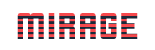
<style>
.page{position:relative;width:155px;height:50px;background:#ffffff}
.page>*{position:absolute;margin:0}
.t1{font:36px "Cornerstone"}
</style>
<div class="page">
<p class="t1" style="left:17px;top:13px;width:121px;height:26px">mirage</p>
</div>
